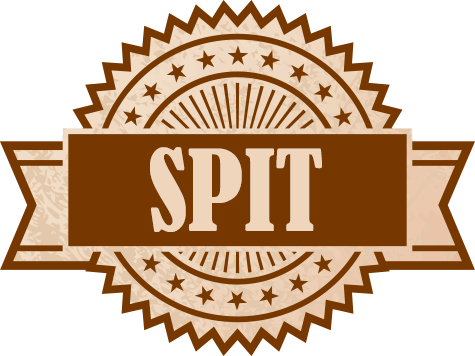
<style>
.page{position:relative;width:475px;height:356px;background:#ffffff}
.page>*{position:absolute;margin:0}
.t1{font:104.7px "BernardMT-Condensed";color:#eed5bb}
</style>
<div class="page">
<p class="t1" style="left:150px;top:147px;width:172px;height:85px">SPIT</p>
</div>
